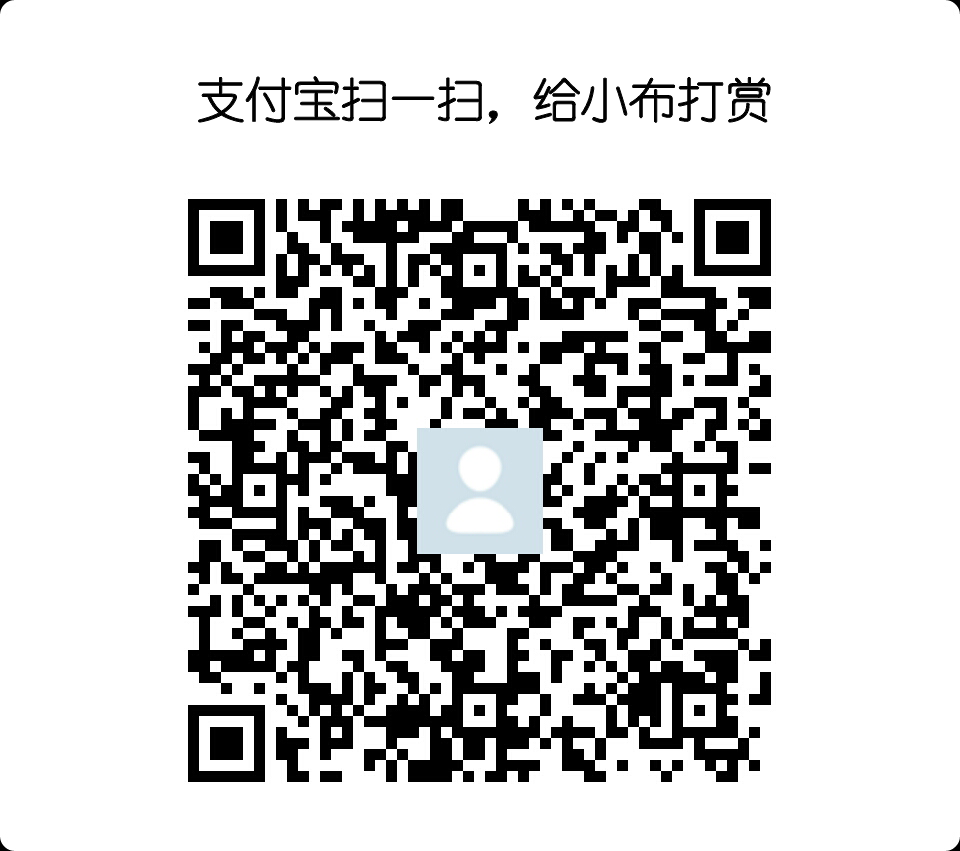
<style>
.page{position:relative;width:960px;height:851px;background:#ffffff}
.page>*{position:absolute;margin:0}
.t1{font:48px "YouYuan";color:#000000}
</style>
<div class="page">
<p class="t1" style="left:198px;top:76px;width:572px;height:48px">支付宝扫一扫，给小布打赏</p>
</div>
